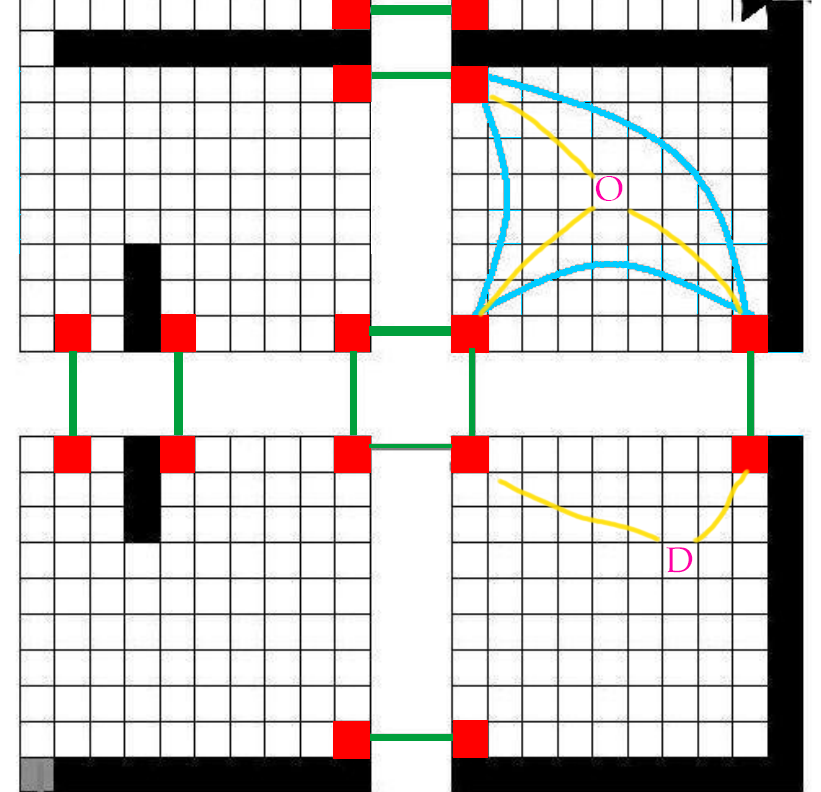
<style>
.page{position:relative;width:821px;height:792px;background:#ffffff}
.page>*{position:absolute;margin:0}
.t1{font:35.8px "PalatinoLinotype-Roman";color:#ff00a8}
.t2{font:35.7px "PalatinoLinotype-Roman";color:#ff00a8}
</style>
<div class="page">
<p class="t1" style="left:595px;top:176px;width:28px;height:25px">O</p>
<p class="t2" style="left:666px;top:547px;width:27px;height:26px">D</p>
</div>
